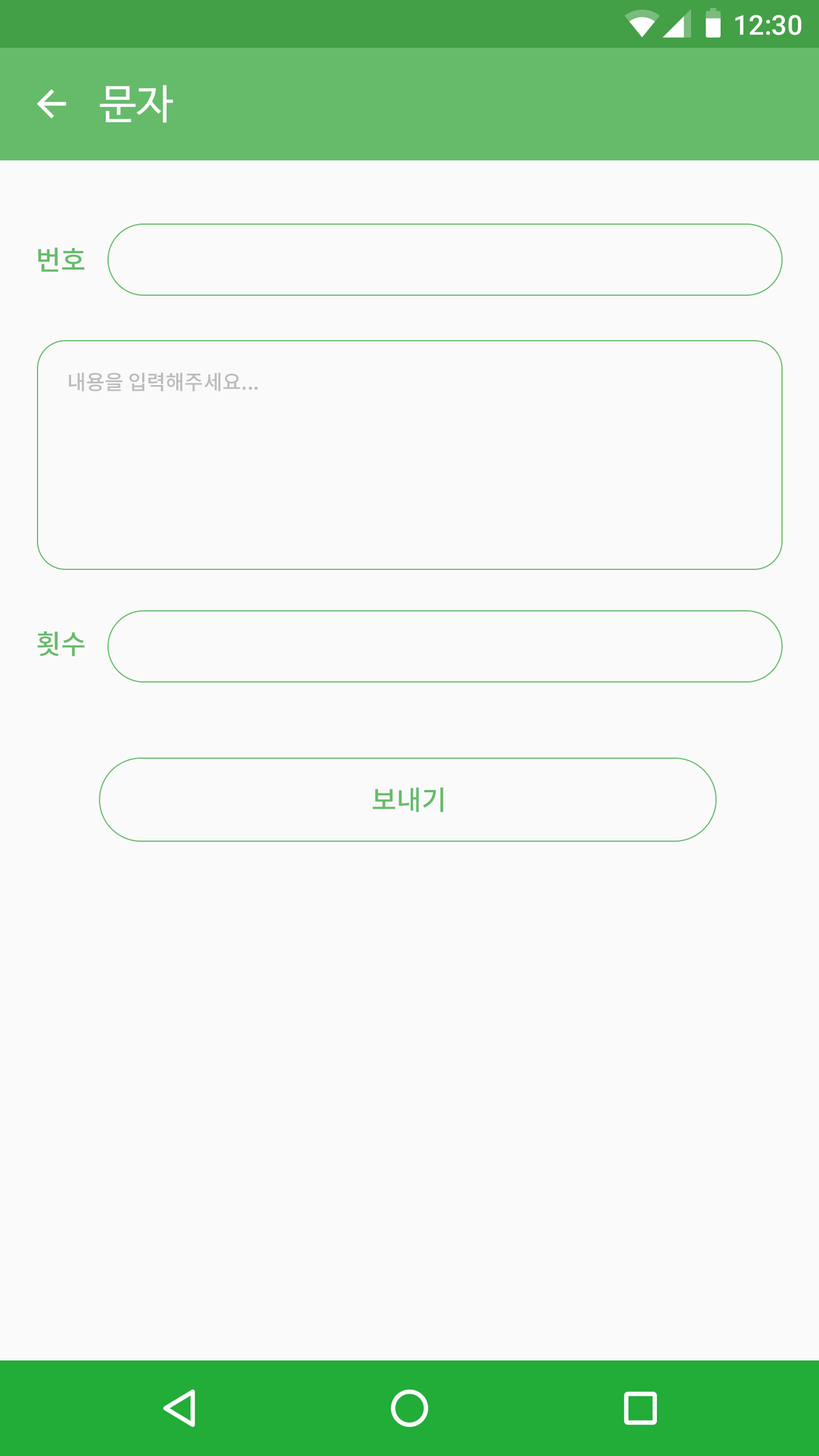
<style>
.page{position:relative;width:819px;height:1456px;background:#fafafa}
.page>*{position:absolute;margin:0}
.t1{font:27.3px "Roboto-Medium";color:#ffffff}
.t2{font:40.9px "NanumBarunGothic";color:#ffffff}
.t3{font:27.3px "NotoSansCJKkr-Medium";color:#66bb6a}
.t4{font:20.5px "NotoSansCJKkr-Medium";color:#bbbbbb}
</style>
<div class="page">
<p class="t1" style="left:735px;top:15px;width:66px;height:20px">12:30</p>
<p class="t2" style="left:100px;top:85px;width:73px;height:38px">문자</p>
<p class="t3" style="left:38px;top:247px;width:47px;height:25px">번호</p>
<p class="t4" style="left:69px;top:373px;width:189px;height:18px">내용을 입력해주세요...</p>
<p class="t3" style="left:37px;top:631px;width:48px;height:25px">횟수</p>
<p class="t3" style="left:373px;top:787px;width:71px;height:25px">보내기</p>
</div>
